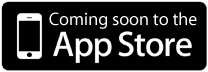
<style>
.page{position:relative;width:208px;height:72px;background:#000000}
.page>*{position:absolute;margin:0}
.t1{font:18px "MyriadPro-Regular";color:#ffffff}
</style>
<div class="page">
<p class="t1" style="left:49px;top:12px;width:148px;height:17px">Coming soon to the</p>
</div>
